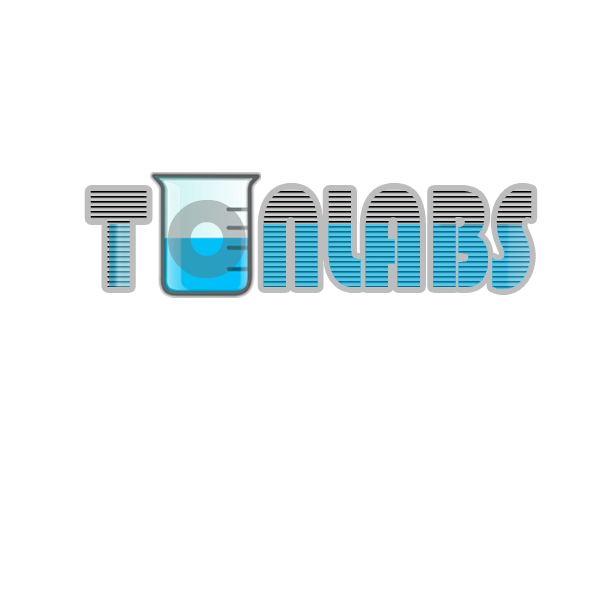
<style>
.page{position:relative;width:600px;height:600px;background:#ffffff}
.page>*{position:absolute;margin:0}
.t1{font:143.6px "Bauhaus93";scale:0.77 1}
.t2{font:110.8px "Bauhaus93"}
</style>
<div class="page">
<p class="t1" style="left:90px;top:189px;width:442px;height:100px">T    NLABS</p>
<p class="t2" style="left:167px;top:200px;width:79px;height:78px">O</p>
</div>
